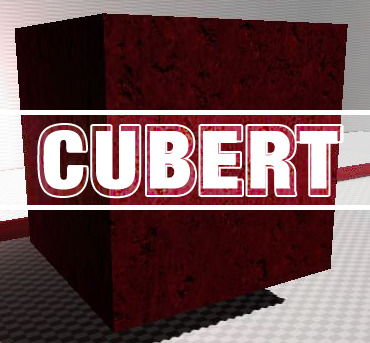
<style>
.page{position:relative;width:370px;height:343px}
.page>*{position:absolute;margin:0}
.t1{font:96px "Harvest";color:#ffffff}
.t2{font:80px "Harvest";letter-spacing:0.105em;color:#ffffff}
</style>
<div class="page">
<p class="t1" style="left:39px;top:125px;width:303px;height:72px">CUBERT</p>
<p class="t2" style="left:43px;top:130px;width:295px;height:60px">CUBERT</p>
</div>
